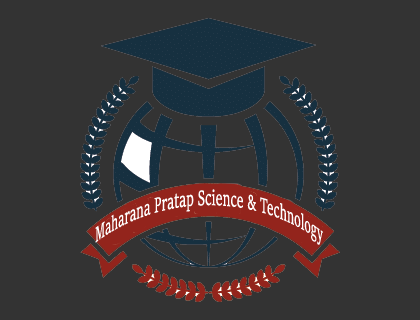
<style>
.page{position:relative;width:420px;height:320px;background:#333333}
.page>*{position:absolute;margin:0}
.t1{font:23.1px "SitkaBanner";color:#ffffff;scale:0.43 1}
</style>
<div class="page">
<p class="t1" style="left:95px;top:189px;width:228px;height:56px;text-align:center">Maharana Pratap Science &amp; Technology</p>
</div>
